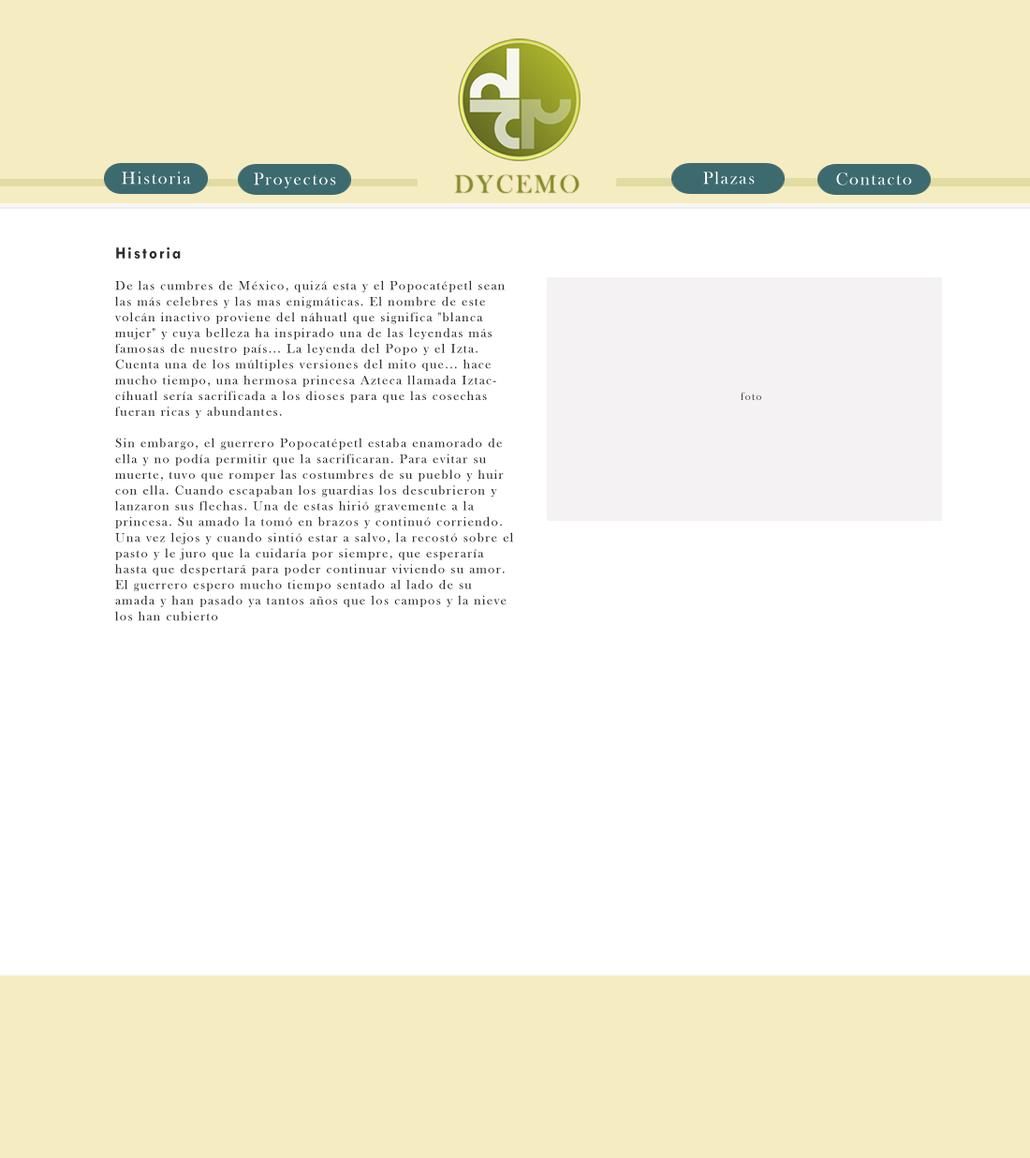
<style>
.page{position:relative;width:1030px;height:1158px;background:#ffffff}
.page>*{position:absolute;margin:0}
.t1{font:17.8px "BaskOldFace";letter-spacing:0.1em;color:#ffffff}
.t2{font:25.6px "BaskOldFace";letter-spacing:0.1em;color:#878e2f}
.t3{font:13.1px "BaskOldFace";letter-spacing:0.1em;color:#2e2e2e}
.t4{font:16.9px "TwCenMT-Bold";letter-spacing:0.1em;color:#2e2e2e}
.t5{font:11.2px "BaskOldFace";letter-spacing:0.1em;color:#454545}
</style>
<div class="page">
<p class="t1" style="left:122px;top:171px;width:69px;height:13px">Historia</p>
<p class="t1" style="left:254px;top:172px;width:82px;height:16px">Proyectos</p>
<p class="t1" style="left:703px;top:171px;width:52px;height:13px">Plazas</p>
<p class="t1" style="left:836px;top:172px;width:76px;height:13px">Contacto</p>
<p class="t2" style="left:454px;top:174px;width:125px;height:19px">DYCEMO</p>
<p class="t3" style="left:115px;top:247px;width:398px;height:374px"><span class="t4">Historia<br></span><br>De las cumbres de México, quizá esta y el Popocatépetl sean las más celebres y las mas enigmáticas. El nombre de este volcán inactivo proviene del náhuatl que significa "blanca mujer" y cuya belleza ha inspirado una de las leyendas más famosas de nuestro país... La leyenda del Popo y el Izta.<br>Cuenta una de los múltiples versiones del mito que... hace mucho tiempo, una hermosa princesa Azteca llamada Iztaccíhuatl sería sacrificada a los dioses para que las cosechas fueran ricas y abundantes. <br><br>Sin embargo, el guerrero Popocatépetl estaba enamorado de ella y no podía permitir que la sacrificaran. Para evitar su muerte, tuvo que romper las costumbres de su pueblo y huir con ella. Cuando escapaban los guardias los descubrieron y lanzaron sus flechas. Una de estas hirió gravemente a la princesa. Su amado la tomó en brazos y continuó corriendo. Una vez lejos y cuando sintió estar a salvo, la recostó sobre el pasto y le juro que la cuidaría por siempre, que esperaría hasta que despertará para poder continuar viviendo su amor. El guerrero espero mucho tiempo sentado al lado de su amada y han pasado ya tantos años que los campos y la nieve los han cubierto</p>
<p class="t5" style="left:741px;top:391px;width:20px;height:9px">foto</p>
</div>
